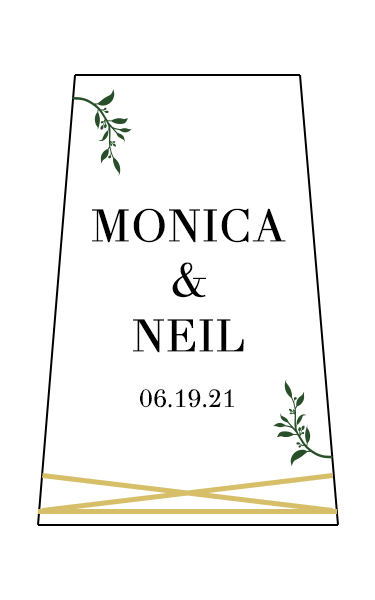
<style>
.page{position:relative;width:375px;height:600px;background:#ffffff}
.page>*{position:absolute;margin:0}
.t1{font:45.8px "TheanoDidot-Regular";color:#000000}
.t2{font:25px "TheanoDidot-Regular";color:#000000}
</style>
<div class="page">
<p class="t1" style="left:92px;top:208px;width:194px;height:145px;text-align:center">MONICA<br>&amp;<br>NEIL</p>
<p class="t2" style="left:140px;top:389px;width:94px;height:19px">06.19.21</p>
</div>
